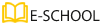
<style>
.page{position:relative;width:100px;height:25px;background:#ffffff}
.page>*{position:absolute;margin:0}
.t1{font:16px "MyriadConceptRoman-Regular";color:#1a1a19;font-weight:bold}
</style>
<div class="page">
<p class="t1" style="left:31px;top:10px;width:69px;height:12px">E-SCHOOL</p>
</div>
